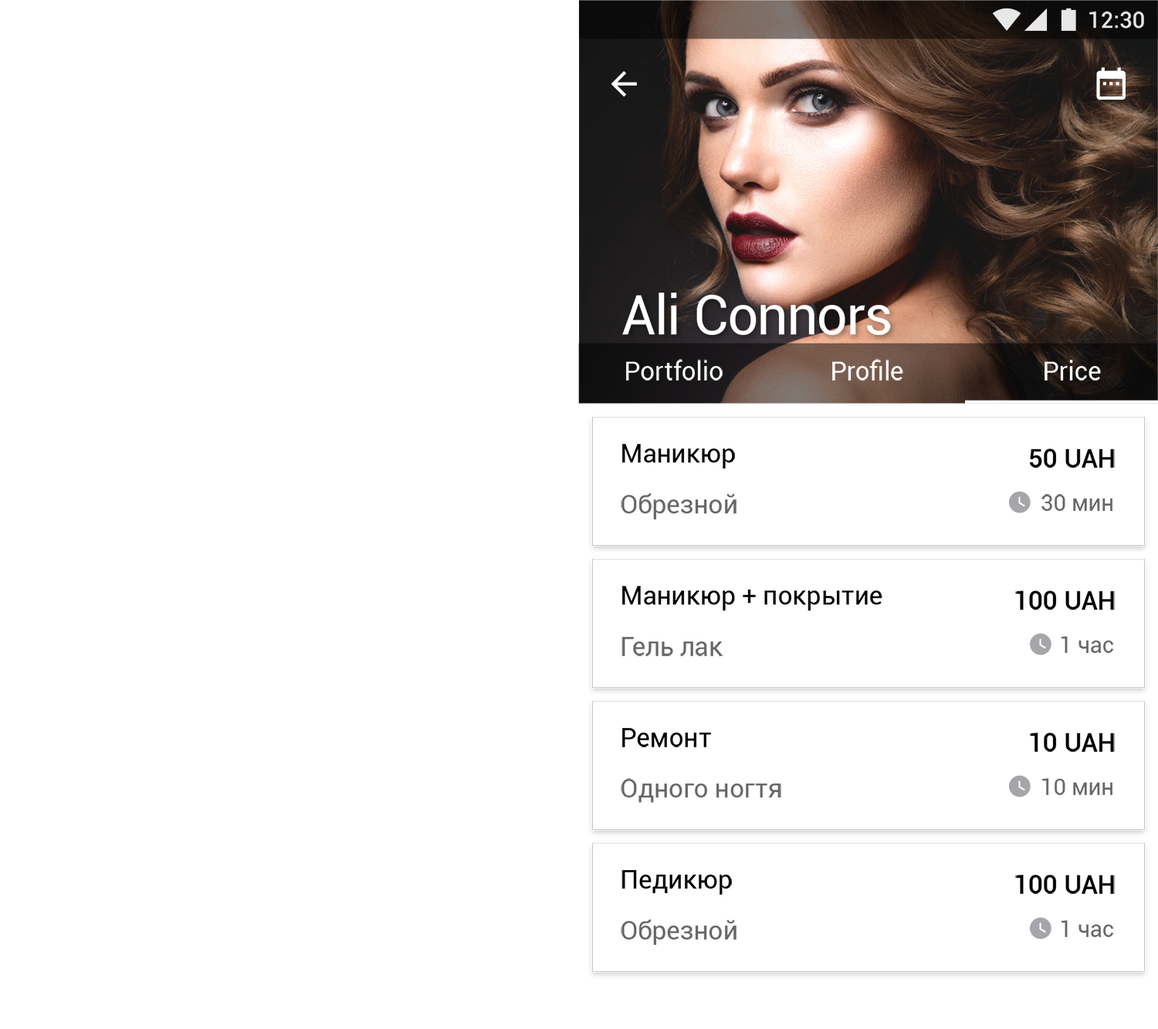
<style>
.page{position:relative;width:1158px;height:1029px;background:#ffffff}
.page>*{position:absolute;margin:0}
.t1{font:22.5px "Roboto-Medium";color:#ffffff}
.t2{font:54.7px "Roboto-Regular";letter-spacing:-0.005em;color:#ffffff}
.t3{font:25.7px "Roboto-Regular";letter-spacing:0.01em;color:#ffffff}
.t4{font:25.7px "Roboto-Regular";color:#000000}
.t5{font:25.7px "Roboto-Medium";color:#000000}
.t6{font:25.7px "Roboto-Regular";color:#666666}
.t7{font:22.5px "Roboto-Regular";color:#666666}
</style>
<div class="page">
<p class="t1" style="left:1090px;top:11px;width:54px;height:18px">12:30</p>
<p class="t2" style="left:622px;top:293px;width:269px;height:42px">Ali Connors</p>
<p class="t3" style="left:626px;top:359px;width:97px;height:22px">Portfolio</p>
<p class="t3" style="left:832px;top:359px;width:72px;height:22px">Profile</p>
<p class="t3" style="left:1045px;top:360px;width:56px;height:21px">Price</p>
<p class="t4" style="left:622px;top:444px;width:113px;height:25px">Маникюр</p>
<p class="t5" style="left:1030px;top:449px;width:85px;height:19px">50 UAH</p>
<p class="t6" style="left:621px;top:493px;width:116px;height:27px">Обрезной</p>
<p class="t7" style="left:1042px;top:494px;width:71px;height:17px">30 мин</p>
<p class="t4" style="left:622px;top:586px;width:261px;height:25px">Маникюр + покрытие</p>
<p class="t5" style="left:1016px;top:591px;width:99px;height:19px">100 UAH</p>
<p class="t6" style="left:622px;top:637px;width:102px;height:19px">Гель лак</p>
<p class="t7" style="left:1062px;top:636px;width:52px;height:17px">1 час</p>
<p class="t4" style="left:622px;top:728px;width:89px;height:20px">Ремонт</p>
<p class="t5" style="left:1030px;top:733px;width:85px;height:19px">10 UAH</p>
<p class="t6" style="left:621px;top:778px;width:161px;height:25px">Одного ногтя</p>
<p class="t7" style="left:1043px;top:778px;width:70px;height:17px">10 мин</p>
<p class="t4" style="left:622px;top:870px;width:110px;height:25px">Педикюр</p>
<p class="t5" style="left:1016px;top:875px;width:99px;height:19px">100 UAH</p>
<p class="t6" style="left:621px;top:920px;width:116px;height:25px">Обрезной</p>
<p class="t7" style="left:1062px;top:921px;width:52px;height:17px">1 час</p>
</div>
